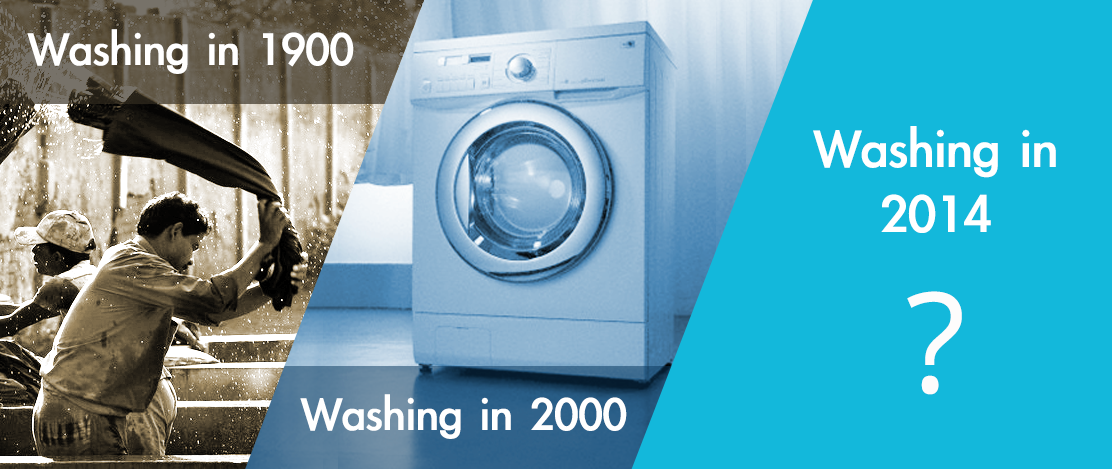
<style>
.page{position:relative;width:1112px;height:469px;background:#13b8db}
.page>*{position:absolute;margin:0}
.t1{font:52px "LiGothicMed";color:#ffffff}
.t2{font:60px/65px "LiGothicMed";color:#ffffff}
.t3{font:138.9px "OpenSans";color:#fdfcfc}
</style>
<div class="page">
<p class="t1" style="left:27px;top:29px;width:327px;height:45px">Washing in 1900</p>
<p class="t2" style="left:813px;top:126px;width:243px;height:107px;text-align:center">Washing in<br>2014</p>
<p class="t3" style="left:907px;top:291px;width:55px;height:104px">?</p>
<p class="t1" style="left:300px;top:394px;width:327px;height:45px">Washing in 2000</p>
</div>
